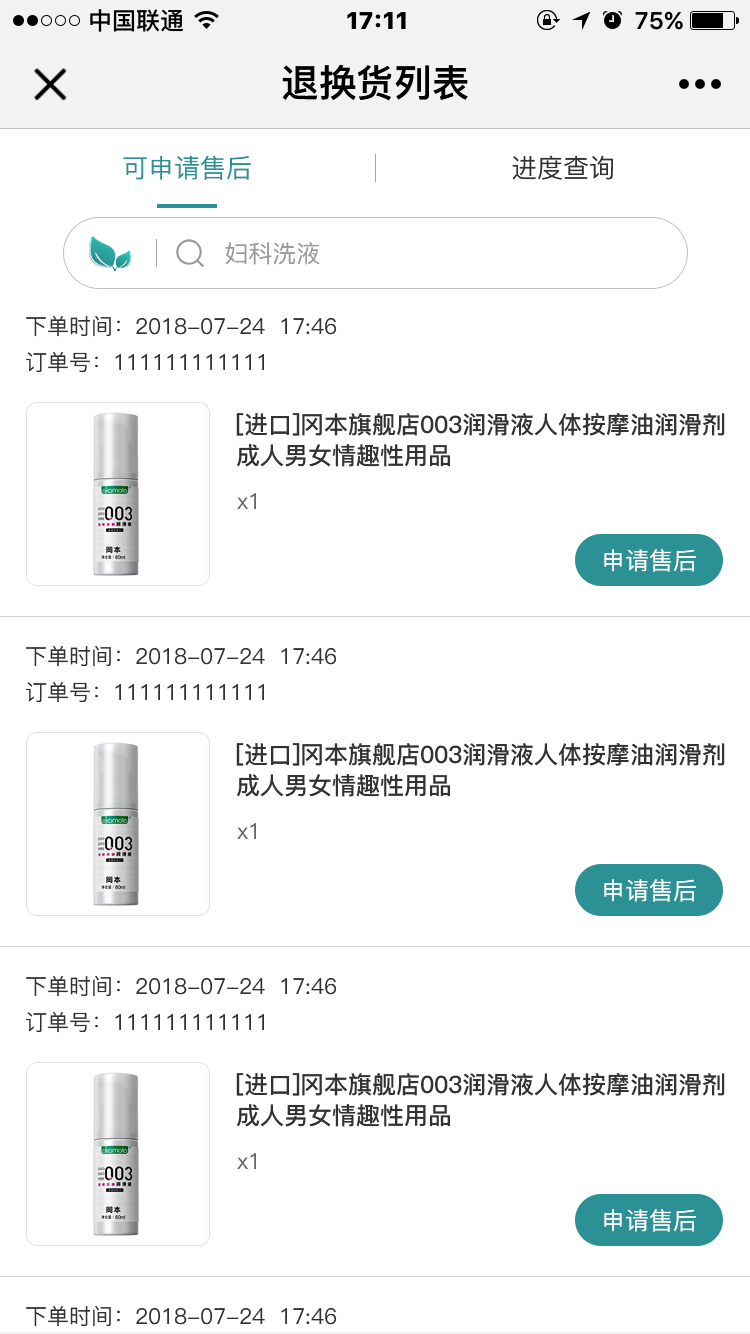
<style>
.page{position:relative;width:750px;height:1334px;background:#ffffff}
.page>*{position:absolute;margin:0}
.t1{font:37.6px "PingFang-SC-Heavy";color:#000000}
.t2{font:26px "PingFang-SC-Medium";color:#2c9195}
.t3{font:26px "PingFang-SC-Medium";color:#323232}
.t4{font:24px "PingFang-SC-Medium";color:#999999}
.t5{font:22px "PingFang-SC-Medium";color:#323232}
.t6{font:24px/31px "PingFang-SC-Bold";color:#323232}
.t7{font:22px "PingFang-SC-Medium";color:#666666}
.t8{font:24px "PingFang-SC-Medium";color:#ffffff}
</style>
<div class="page">
<p class="t1" style="left:282px;top:65px;width:186px;height:36px">退换货列表</p>
<p class="t2" style="left:123px;top:155px;width:128px;height:25px">可申请售后</p>
<p class="t3" style="left:512px;top:155px;width:101px;height:25px">进度查询</p>
<p class="t4" style="left:225px;top:242px;width:95px;height:23px">妇科洗液</p>
<p class="t5" style="left:26px;top:315px;width:311px;height:22px">下单时间：2018-07-24  17:46</p>
<p class="t5" style="left:26px;top:352px;width:238px;height:21px">订单号：111111111111</p>
<p class="t6" style="left:236px;top:413px;width:489px;height:54px">[进口]冈本旗舰店003润滑液人体按摩油润滑剂成人男女情趣性用品</p>
<p class="t7" style="left:237px;top:493px;width:19px;height:16px">x1</p>
<p class="t8" style="left:604px;top:549px;width:92px;height:23px">申请售后</p>
<p class="t5" style="left:26px;top:645px;width:311px;height:22px">下单时间：2018-07-24  17:46</p>
<p class="t5" style="left:26px;top:682px;width:238px;height:21px">订单号：111111111111</p>
<p class="t6" style="left:236px;top:743px;width:489px;height:54px">[进口]冈本旗舰店003润滑液人体按摩油润滑剂成人男女情趣性用品</p>
<p class="t7" style="left:237px;top:823px;width:19px;height:16px">x1</p>
<p class="t8" style="left:604px;top:879px;width:92px;height:23px">申请售后</p>
<p class="t5" style="left:26px;top:975px;width:311px;height:22px">下单时间：2018-07-24  17:46</p>
<p class="t5" style="left:26px;top:1012px;width:238px;height:21px">订单号：111111111111</p>
<p class="t6" style="left:236px;top:1073px;width:489px;height:54px">[进口]冈本旗舰店003润滑液人体按摩油润滑剂成人男女情趣性用品</p>
<p class="t7" style="left:237px;top:1153px;width:19px;height:16px">x1</p>
<p class="t8" style="left:604px;top:1209px;width:92px;height:23px">申请售后</p>
<p class="t5" style="left:26px;top:1305px;width:311px;height:22px">下单时间：2018-07-24  17:46</p>
</div>
